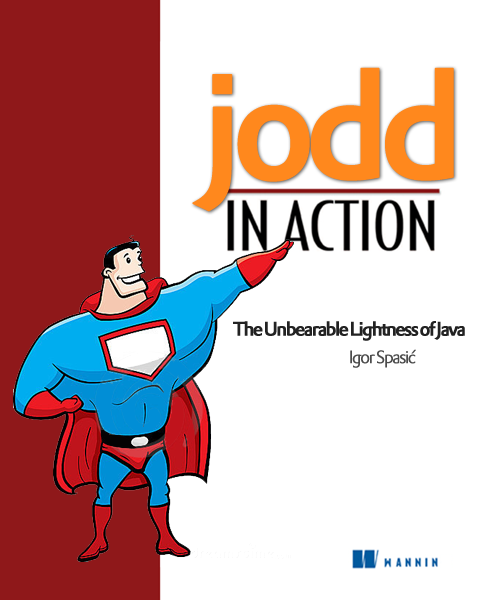
<style>
.page{position:relative;width:478px;height:600px;background:#ffffff}
.page>*{position:absolute;margin:0}
.t1{font:147.4px "DTLProkyonTMedium";letter-spacing:-0.1em;color:#ff881d;font-weight:bold}
.t2{font:19.1px "DTLProkyonTMedium";letter-spacing:-0.11em;color:#222222;font-weight:bold}
.t3{font:17.5px "DTLProkyonTLight";letter-spacing:-0.11em;color:#4c4c4c;font-weight:bold}
</style>
<div class="page">
<p class="t1" style="left:192px;top:67px;width:262px;height:145px">jodd</p>
<p class="t2" style="left:233px;top:321px;width:232px;height:20px">The Unbearable Lightness of Java</p>
<p class="t3" style="left:350px;top:349px;width:66px;height:19px">Igor Spasić</p>
</div>
